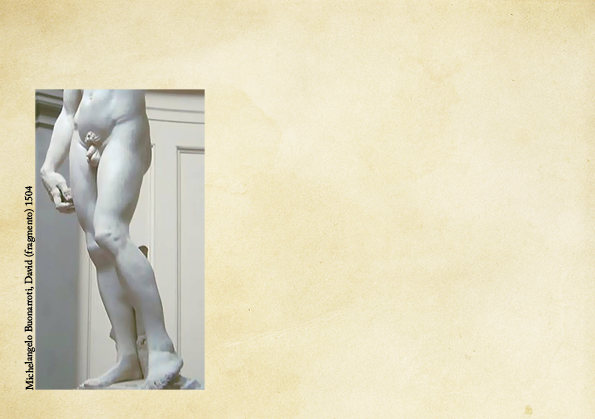
<style>
.page{position:relative;width:595px;height:419px}
.page>*{position:absolute;margin:0}
.t1{font:10px "ACaslonPro-Regular";color:#000000}
</style>
<div class="page">
<p class="t1" style="left:24px;top:186px;width:11px;height:205px;rotate:-90deg">Michelangelo Buonarroti, David (fragmento) 1504</p>
</div>
